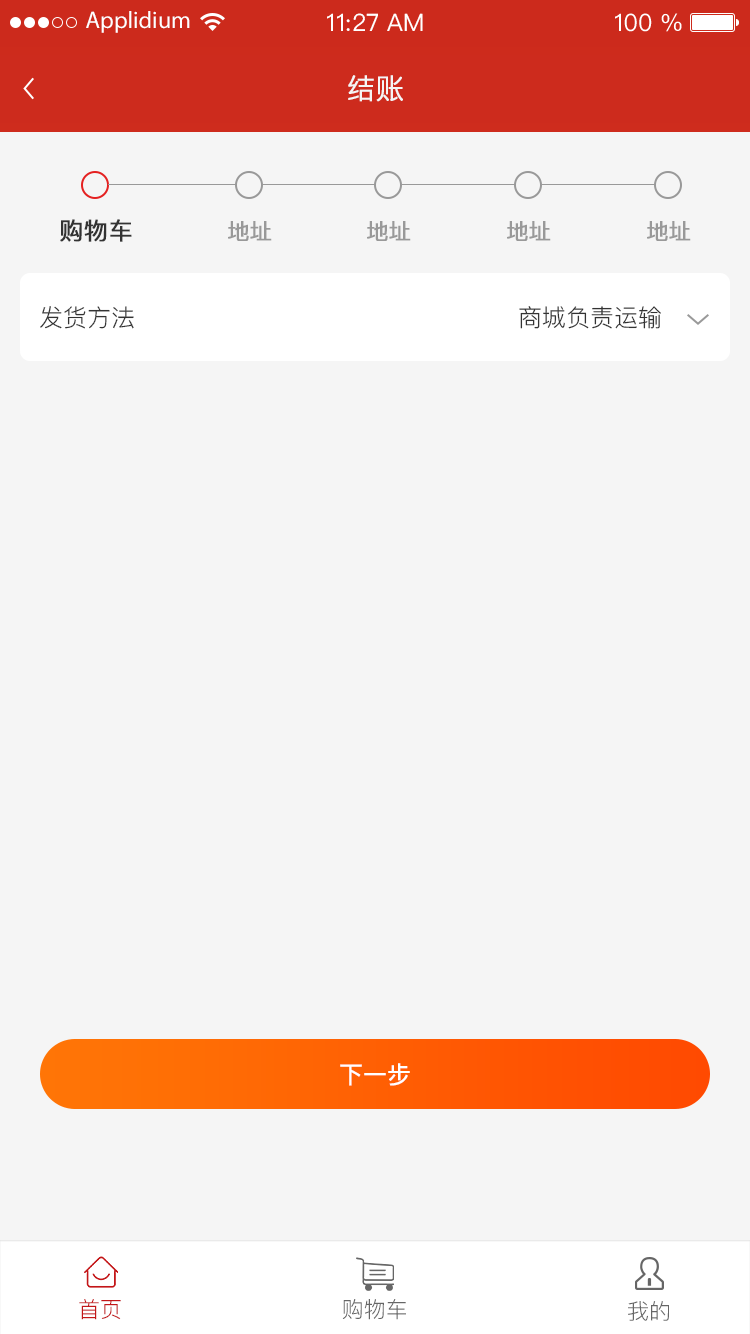
<style>
.page{position:relative;width:750px;height:1334px;background:#f5f5f5}
.page>*{position:absolute;margin:0}
.t1{font:24px "MyriadPro-Regular";color:#ffffff}
.t2{font:24px "PingFangSC-Regular";color:#ffffff}
.t3{font:28px "PingFang-SC-Regular";color:#f5f5f5;text-transform:uppercase;font-weight:bold}
.t4{font:24px "PingFang-SC-Medium";color:#333333;text-transform:uppercase;font-weight:bold}
.t5{font:22px "PingFang-SC-Medium";color:#999999;text-transform:uppercase;font-weight:bold}
.t6{font:24px "PingFang-SC-Regular";color:#333333;text-transform:uppercase}
.t7{font:24px "PingFang-SC-Bold";color:#ffffff;text-transform:uppercase}
.t8{font:22px "PingFang-SC-Regular";color:#c31618}
.t9{font:22px "PingFang-SC-Regular";color:#666666}
</style>
<div class="page">
<p class="t1" style="left:86px;top:11px;width:104px;height:22px">Applidium</p>
<p class="t2" style="left:327px;top:13px;width:96px;height:18px">11:27 AM</p>
<p class="t2" style="left:615px;top:13px;width:67px;height:19px">100 %</p>
<p class="t3" style="left:348px;top:75px;width:55px;height:27px">结账</p>
<p class="t4" style="left:60px;top:219px;width:72px;height:23px">购物车</p>
<p class="t5" style="left:228px;top:221px;width:44px;height:20px">地址</p>
<p class="t5" style="left:367px;top:221px;width:44px;height:20px">地址</p>
<p class="t5" style="left:507px;top:221px;width:44px;height:20px">地址</p>
<p class="t5" style="left:647px;top:221px;width:44px;height:20px">地址</p>
<p class="t6" style="left:40px;top:306px;width:94px;height:23px">发货方法</p>
<p class="t6" style="left:519px;top:306px;width:142px;height:23px">商城负责运输</p>
<p class="t7" style="left:340px;top:1063px;width:70px;height:23px">下一步</p>
<p class="t8" style="left:79px;top:1299px;width:42px;height:21px">首页</p>
<p class="t9" style="left:342px;top:1299px;width:64px;height:21px">购物车</p>
<p class="t9" style="left:628px;top:1301px;width:41px;height:20px">我的</p>
</div>
